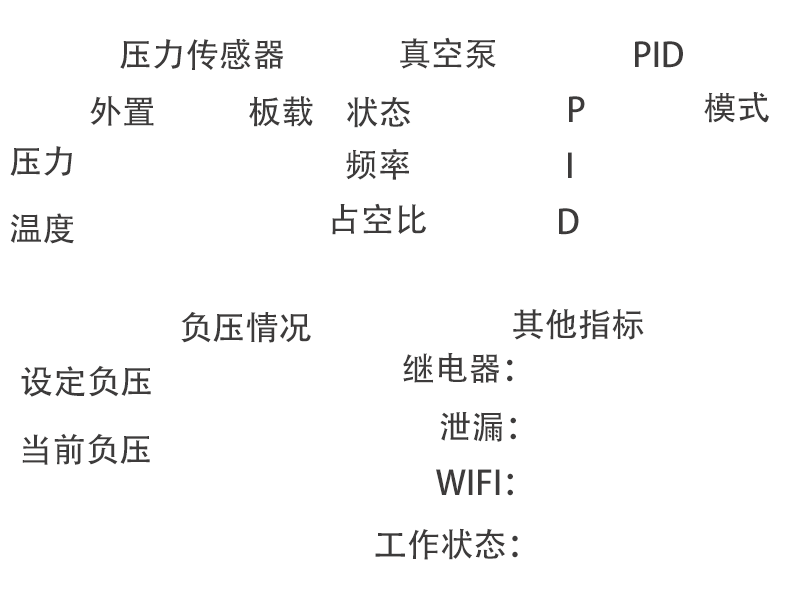
<style>
.page{position:relative;width:800px;height:600px;background:#ffffff}
.page>*{position:absolute;margin:0}
.t1{font:33.3px "AdobeHeitiStd-Regular";color:#3d3b3b}
</style>
<div class="page">
<p class="t1" style="left:120px;top:38px;width:164px;height:32px">压力传感器</p>
<p class="t1" style="left:400px;top:37px;width:96px;height:32px">真空泵</p>
<p class="t1" style="left:635px;top:41px;width:48px;height:27px">PID</p>
<p class="t1" style="left:90px;top:96px;width:64px;height:30px">外置</p>
<p class="t1" style="left:249px;top:96px;width:64px;height:31px">板载</p>
<p class="t1" style="left:347px;top:96px;width:64px;height:32px">状态</p>
<p class="t1" style="left:569px;top:96px;width:16px;height:26px">P</p>
<p class="t1" style="left:704px;top:91px;width:65px;height:32px">模式</p>
<p class="t1" style="left:10px;top:146px;width:62px;height:30px">压力</p>
<p class="t1" style="left:346px;top:149px;width:63px;height:31px">频率</p>
<p class="t1" style="left:568px;top:152px;width:4px;height:26px">I</p>
<p class="t1" style="left:332px;top:203px;width:95px;height:32px">占空比</p>
<p class="t1" style="left:559px;top:208px;width:20px;height:27px">D</p>
<p class="t1" style="left:10px;top:213px;width:64px;height:31px">温度</p>
<p class="t1" style="left:181px;top:311px;width:130px;height:32px">负压情况</p>
<p class="t1" style="left:513px;top:309px;width:131px;height:31px">其他指标</p>
<p class="t1" style="left:403px;top:352px;width:110px;height:31px">继电器：</p>
<p class="t1" style="left:21px;top:365px;width:130px;height:32px">设定负压</p>
<p class="t1" style="left:440px;top:412px;width:76px;height:30px">泄漏：</p>
<p class="t1" style="left:22px;top:433px;width:128px;height:32px">当前负压</p>
<p class="t1" style="left:436px;top:469px;width:77px;height:27px">WIFI：</p>
<p class="t1" style="left:375px;top:528px;width:143px;height:32px">工作状态：</p>
</div>
